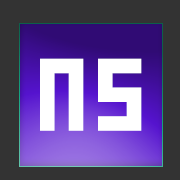
<style>
.page{position:relative;width:180px;height:180px;background:#333333}
.page>*{position:absolute;margin:0}
.t1{font:230px "ObelusCompact";color:#ffffff}
</style>
<div class="page">
<p class="t1" style="left:40px;top:58px;width:102px;height:73px">NS</p>
</div>
